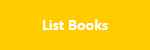
<style>
.page{position:relative;width:150px;height:50px;background:#ffcc00}
.page>*{position:absolute;margin:0}
.t1{font:16px "Calibri-Bold";color:#ffffff}
</style>
<div class="page">
<p class="t1" style="left:43px;top:19px;width:65px;height:11px">List Books</p>
</div>
